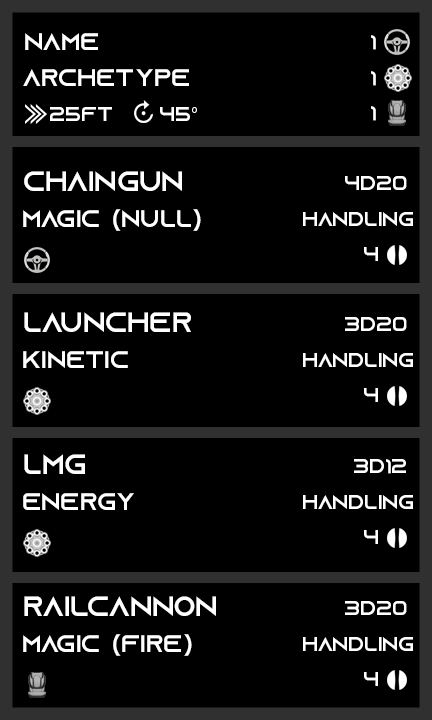
<style>
.page{position:relative;width:432px;height:720px;background:#000000}
.page>*{position:absolute;margin:0}
.t1{font:24px "AzonixRegular";color:#ffffff}
.t2{font:20px "AzonixRegular";color:#ffffff}
.t3{font:20px "MyriadPro-Regular";color:#ffffff}
.t4{font:28px "AzonixRegular";color:#ffffff}
</style>
<div class="page">
<p class="t1" style="left:25px;top:33px;width:73px;height:17px">name</p>
<p class="t2" style="left:371px;top:35px;width:5px;height:15px">1</p>
<p class="t1" style="left:23px;top:69px;width:166px;height:17px">archetype</p>
<p class="t2" style="left:371px;top:71px;width:5px;height:15px">1</p>
<p class="t2" style="left:50px;top:107px;width:62px;height:14px">25ft</p>
<p class="t2" style="left:160px;top:107px;width:37px;height:14px">45<span class="t3">°</span></p>
<p class="t2" style="left:371px;top:106px;width:5px;height:15px">1</p>
<p class="t4" style="left:24px;top:171px;width:158px;height:20px">chaingun</p>
<p class="t2" style="left:345px;top:176px;width:62px;height:14px">4d20</p>
<p class="t1" style="left:23px;top:209px;width:178px;height:22px">magic (null)</p>
<p class="t2" style="left:303px;top:212px;width:110px;height:14px">handling</p>
<p class="t2" style="left:364px;top:247px;width:14px;height:14px">4</p>
<p class="t4" style="left:24px;top:312px;width:167px;height:20px">launcher</p>
<p class="t2" style="left:345px;top:317px;width:62px;height:14px">3d20</p>
<p class="t1" style="left:23px;top:351px;width:105px;height:17px">kinetic</p>
<p class="t2" style="left:303px;top:353px;width:110px;height:14px">handling</p>
<p class="t2" style="left:364px;top:388px;width:14px;height:14px">4</p>
<p class="t4" style="left:24px;top:454px;width:61px;height:20px">lmg</p>
<p class="t2" style="left:354px;top:459px;width:52px;height:15px">3d12</p>
<p class="t1" style="left:23px;top:493px;width:111px;height:17px">energy</p>
<p class="t2" style="left:303px;top:495px;width:110px;height:14px">handling</p>
<p class="t2" style="left:364px;top:530px;width:14px;height:14px">4</p>
<p class="t4" style="left:24px;top:596px;width:192px;height:20px">railcannon</p>
<p class="t2" style="left:345px;top:601px;width:62px;height:14px">3d20</p>
<p class="t1" style="left:23px;top:634px;width:169px;height:22px">magic (fire)</p>
<p class="t2" style="left:303px;top:637px;width:110px;height:14px">handling</p>
<p class="t2" style="left:364px;top:672px;width:14px;height:14px">4</p>
</div>
